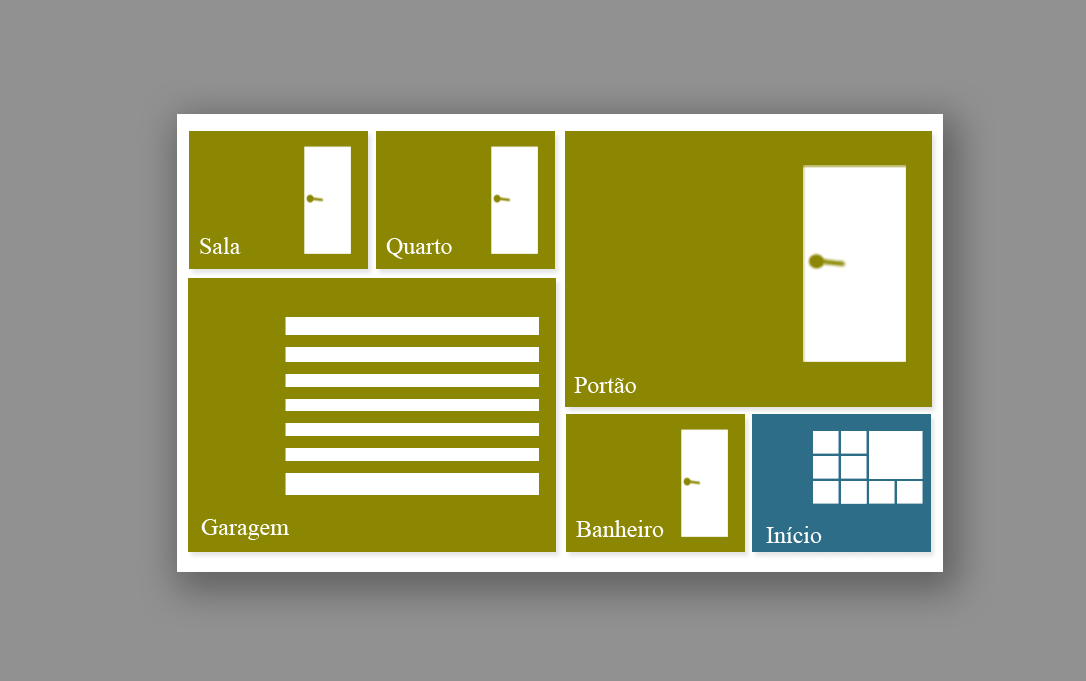
<style>
.page{position:relative;width:1086px;height:681px;background:#919191}
.page>*{position:absolute;margin:0}
.t1{font:24px "TimesNewRomanPSMT";color:#ffffff}
</style>
<div class="page">
<p class="t1" style="left:200px;top:237px;width:41px;height:17px">Sala</p>
<p class="t1" style="left:386px;top:238px;width:66px;height:21px">Quarto</p>
<p class="t1" style="left:574px;top:377px;width:62px;height:16px">Portão</p>
<p class="t1" style="left:201px;top:519px;width:88px;height:21px">Garagem</p>
<p class="t1" style="left:576px;top:520px;width:88px;height:17px">Banheiro</p>
<p class="t1" style="left:766px;top:526px;width:56px;height:17px">Início</p>
</div>
